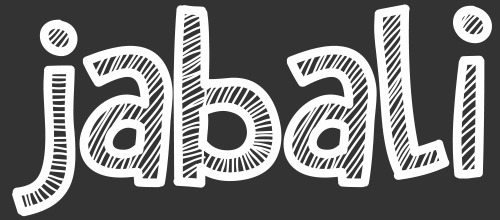
<style>
.page{position:relative;width:500px;height:220px;background:#333333}
.page>*{position:absolute;margin:0}
.t1{font:215.8px "KBZipaDeeDooDah";color:#fefefe}
</style>
<div class="page">
<p class="t1" style="left:12px;top:4px;width:480px;height:213px">jabali</p>
</div>
